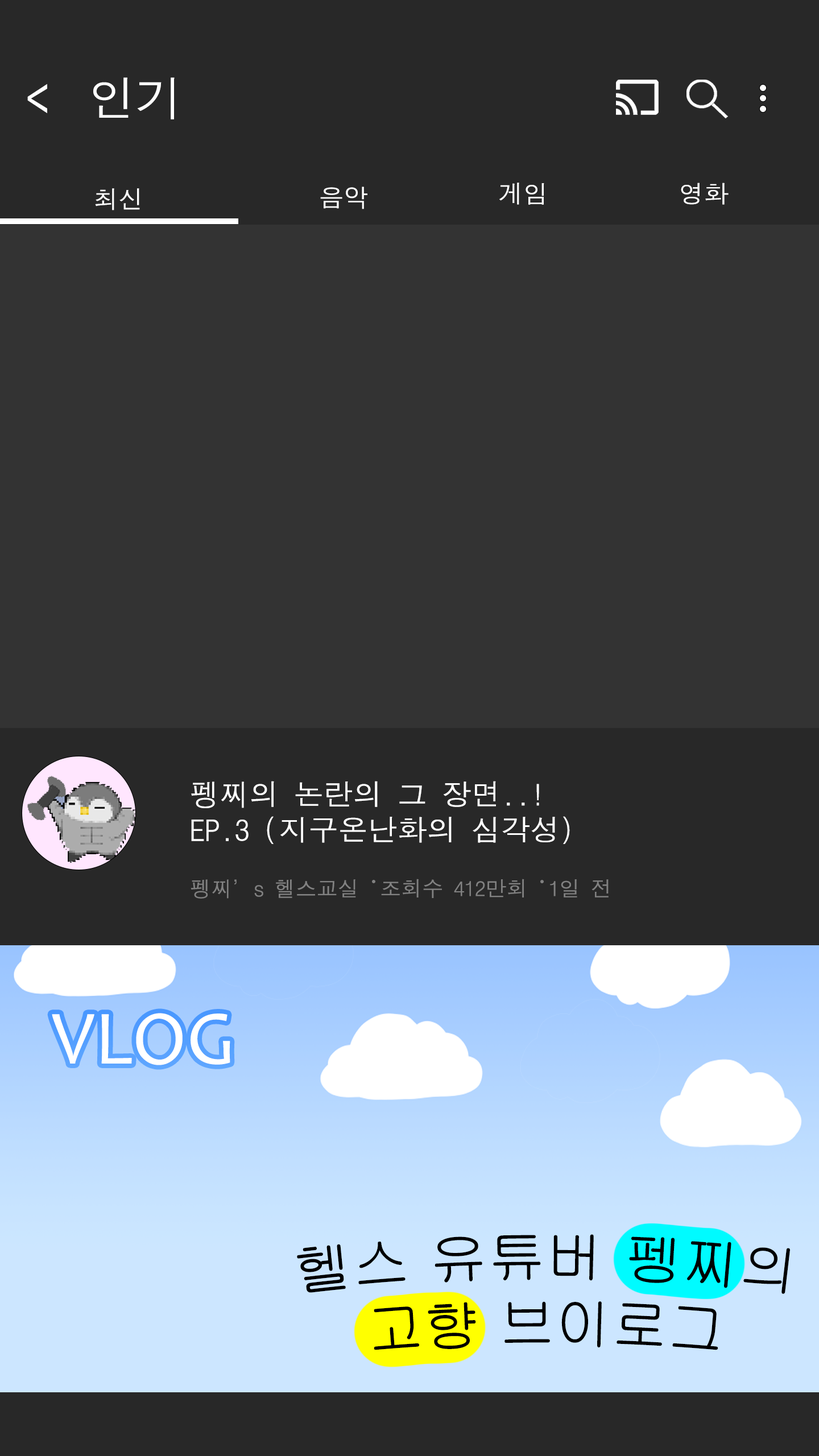
<style>
.page{position:relative;width:819px;height:1456px;background:#333333}
.page>*{position:absolute;margin:0}
.t1{font:47.2px "DotumChe";color:#ffffff}
.t2{font:59.8px "DotumChe";color:#ffffff;scale:0.79 1}
.t3{font:24.9px "DotumChe";color:#ffffff}
.t4{font:29.6px "DotumChe";color:#ffffff}
.t5{font:21.1px "DotumChe";color:#818181}
.t6{font:77.4px "Candara";color:#ffffff}
.t7{font:55.6px "Gulim";color:#000000}
</style>
<div class="page">
<p class="t1" style="left:93px;top:77px;width:82px;height:42px">인기</p>
<p class="t2" style="left:27px;top:84px;width:20px;height:29px">&lt;</p>
<p class="t3" style="left:499px;top:183px;width:45px;height:22px">게임</p>
<p class="t3" style="left:681px;top:183px;width:48px;height:22px">영화</p>
<p class="t3" style="left:95px;top:188px;width:45px;height:22px">최신</p>
<p class="t3" style="left:320px;top:187px;width:47px;height:22px">음악</p>
<p class="t4" style="left:191px;top:781px;width:379px;height:63px">펭찌의 논란의 그 장면..!<br>EP.3 (지구온난화의 심각성)</p>
<p class="t5" style="left:191px;top:879px;width:418px;height:20px">펭찌’s 헬스교실  조회수 412만회  1일 전</p>
<p class="t6" style="left:52px;top:1013px;width:178px;height:52px">VLOG</p>
<p class="t7" style="left:297px;top:1234px;width:493px;height:116px;text-align:center">헬스 유튜버 펭찌의<br>고향 브이로그</p>
</div>
